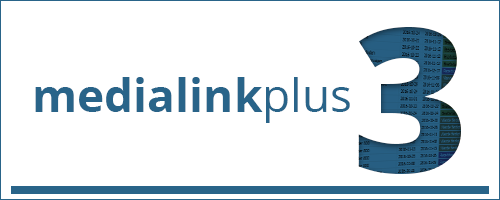
<style>
.page{position:relative;width:500px;height:200px;background:#ffffff}
.page>*{position:absolute;margin:0}
.t1{font:200px "OpenSans-Extrabold"}
.t2{font:46px "OpenSans-Bold";color:#296388}
.t3{font:46px "OpenSans";color:#296388}
</style>
<div class="page">
<p class="t1" style="left:358px;top:27px;width:103px;height:147px">3</p>
<p class="t2" style="left:35px;top:77px;width:315px;height:46px">medialink<span class="t3">plus</span></p>
</div>
